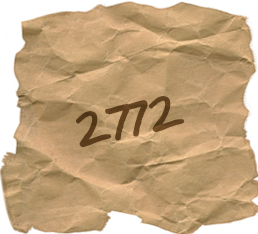
<style>
.page{position:relative;width:258px;height:234px}
.page>*{position:absolute;margin:0}
.t1{font:36px "DanielBlack";color:#63461b}
</style>
<div class="page">
<p class="t1" style="left:76px;top:96px;width:109px;height:51px;rotate:-11deg;opacity:0.81">2772</p>
</div>
